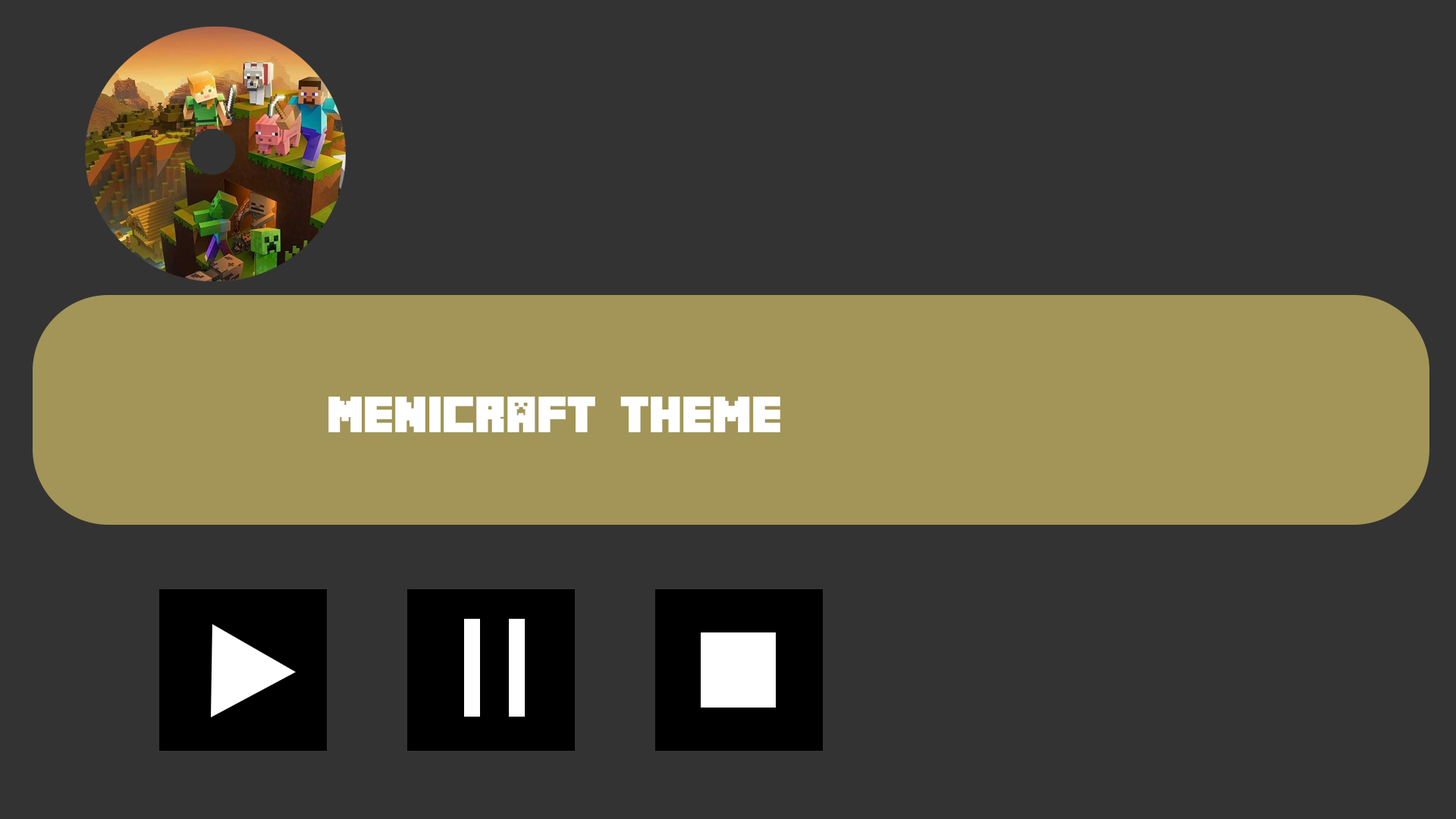
<style>
.page{position:relative;width:1456px;height:819px;background:#333333}
.page>*{position:absolute;margin:0}
.t1{font:45.5px "Minecrafter";color:#ffffff}
</style>
<div class="page">
<p class="t1" style="left:328px;top:397px;width:452px;height:35px">Menicraft Theme</p>
</div>
